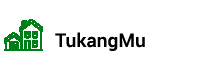
<style>
.page{position:relative;width:210px;height:70px;background:#ffffff}
.page>*{position:absolute;margin:0}
.t1{font:18.6px "Roboto-Medium";color:#000000}
</style>
<div class="page">
<p class="t1" style="left:55px;top:32px;width:90px;height:19px">TukangMu</p>
</div>
